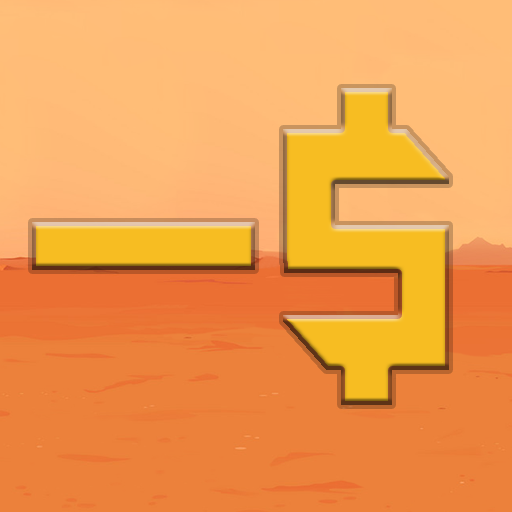
<style>
.page{position:relative;width:512px;height:512px;background:#ec813b}
.page>*{position:absolute;margin:0}
.t1{font:451.9px "BigSpace";color:#f7bd22;font-variant:small-caps}
</style>
<div class="page">
<p class="t1" style="left:32px;top:88px;width:417px;height:317px">-$</p>
</div>
